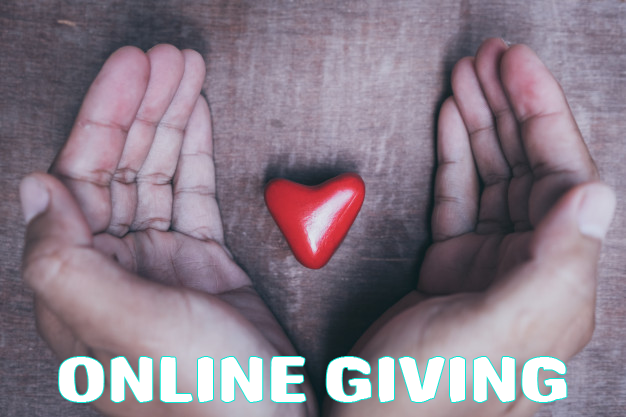
<style>
.page{position:relative;width:626px;height:417px}
.page>*{position:absolute;margin:0}
.t1{font:32px "3000";color:#ffffff;scale:0.82 1}
</style>
<div class="page">
<p class="t1" style="left:59px;top:357px;width:508px;height:45px">ONLINE GIVING</p>
</div>
